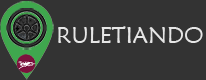
<style>
.page{position:relative;width:206px;height:80px;background:#333333}
.page>*{position:absolute;margin:0}
.t1{font:23.4px "MaiandraGD-Regular";color:#e6e6e6}
</style>
<div class="page">
<p class="t1" style="left:58px;top:26px;width:145px;height:17px">RULETIANDO</p>
</div>
